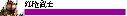
<style>
.page{position:relative;width:127px;height:16px;background:#ffffff}
.page>*{position:absolute;margin:0}
.t1{font:8px "SimSun";letter-spacing:-0.05em;color:#060906;text-transform:uppercase}
</style>
<div class="page">
<p class="t1" style="left:25px;top:0px;width:28px;height:8px">红枪武士</p>
</div>
